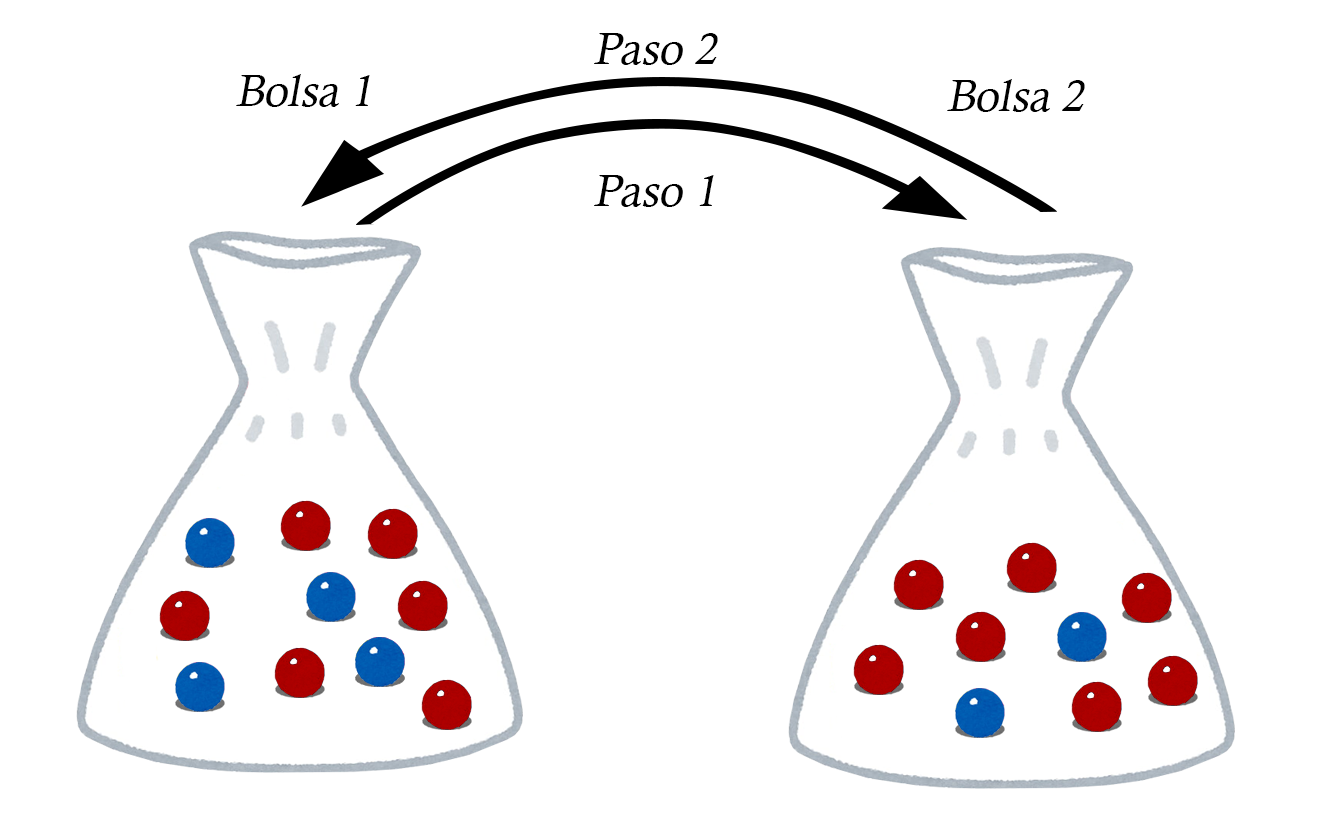
<style>
.page{position:relative;width:1326px;height:817px;background:#ffffff}
.page>*{position:absolute;margin:0}
.t1{font:44.6px "CalistoMT";color:#000000;font-style:italic}
</style>
<div class="page">
<p class="t1" style="left:594px;top:33px;width:124px;height:32px">Paso 2</p>
<p class="t1" style="left:236px;top:74px;width:134px;height:33px">Bolsa 1</p>
<p class="t1" style="left:947px;top:79px;width:138px;height:33px">Bolsa 2</p>
<p class="t1" style="left:594px;top:175px;width:120px;height:32px">Paso 1</p>
</div>
